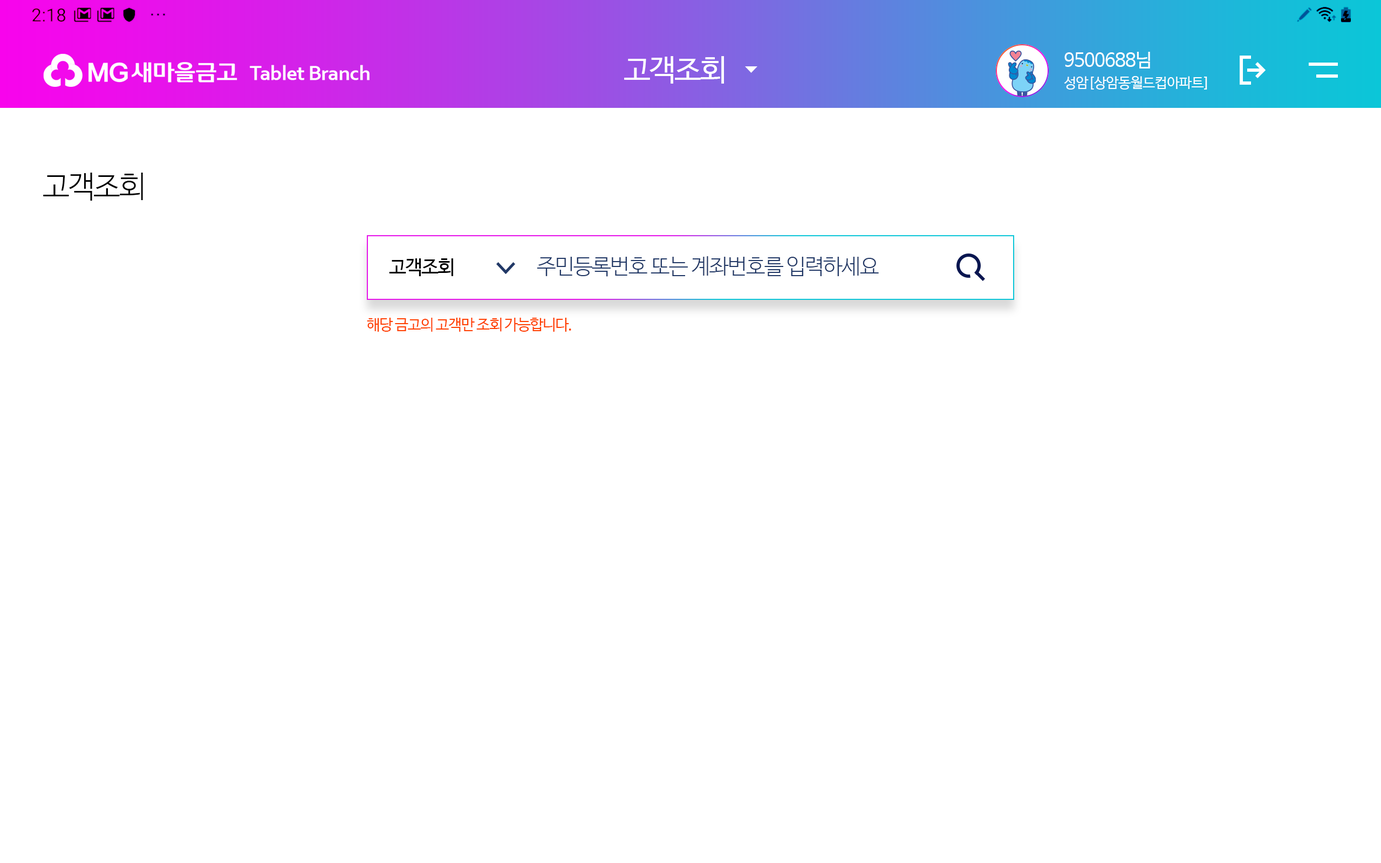
<style>
.page{position:relative;width:1381px;height:863px;background:#ffffff}
.page>*{position:absolute;margin:0}
.t1{font:14px/21.6px "NanumBarunGothic";letter-spacing:-0.025em;color:#ffffff}
.t2{font:18.3px/21.6px "NanumBarunGothic";letter-spacing:-0.025em;color:#ffffff}
.t3{font:30.2px "NanumBarunGothic";letter-spacing:-0.05em;color:#ffffff}
.t4{font:30.2px "NanumBarunGothicLight";letter-spacing:-0.05em;color:#000000}
.t5{font:21.6px "NanumBarunGothicLight";letter-spacing:-0.05em;color:#213866}
.t6{font:19.4px "NanumBarunGothic";letter-spacing:-0.05em;color:#000000}
.t7{font:15.1px "NanumBarunGothic";letter-spacing:-0.05em;color:#ff4000}
</style>
<div class="page">
<p class="t1" style="left:1064px;top:52px;width:144px;height:38px"><span class="t2">9500688님<br></span>성암[상암동월드컵아파트]</p>
<p class="t3" style="left:624px;top:56px;width:100px;height:28px">고객조회</p>
<p class="t4" style="left:43px;top:173px;width:100px;height:28px">고객조회</p>
<p class="t5" style="left:537px;top:256px;width:342px;height:21px">주민등록번호 또는 계좌번호를 입력하세요</p>
<p class="t6" style="left:389px;top:258px;width:64px;height:19px">고객조회</p>
<p class="t7" style="left:367px;top:318px;width:204px;height:14px">해당 금고의 고객만 조회 가능합니다.</p>
</div>
